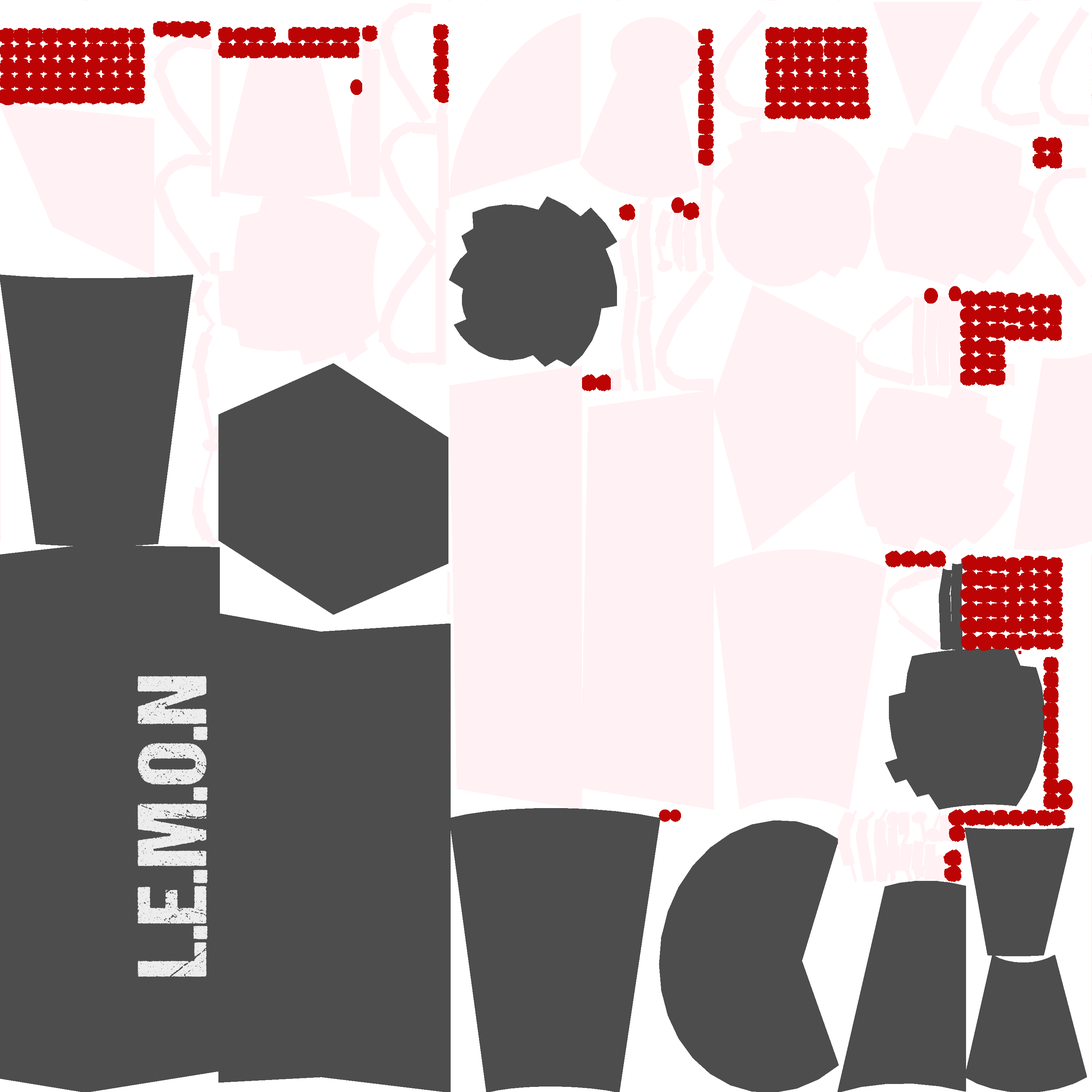
<style>
.page{position:relative;width:1092px;height:1092px;background:#4d4d4d}
.page>*{position:absolute;margin:0}
.t1{font:98.2px "DCC-Ash";color:#ededed;scale:1.06 1}
</style>
<div class="page">
<p class="t1" style="left:138px;top:676px;width:70px;height:301px;rotate:-90deg">L.E.M.O.N</p>
</div>
